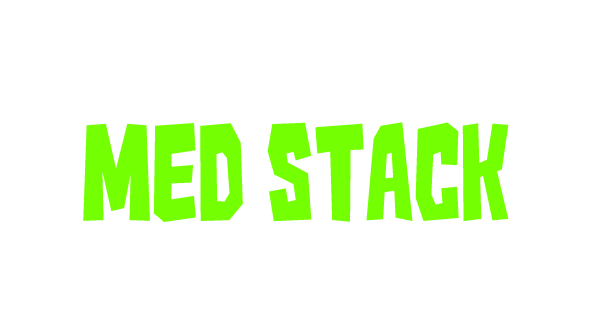
<style>
.page{position:relative;width:603px;height:326px;background:#ffffff}
.page>*{position:absolute;margin:0}
.t1{font:118.1px "Kaiju-Monster__G";color:#74ff02}
</style>
<div class="page">
<p class="t1" style="left:83px;top:122px;width:426px;height:100px">Med Stack</p>
</div>
